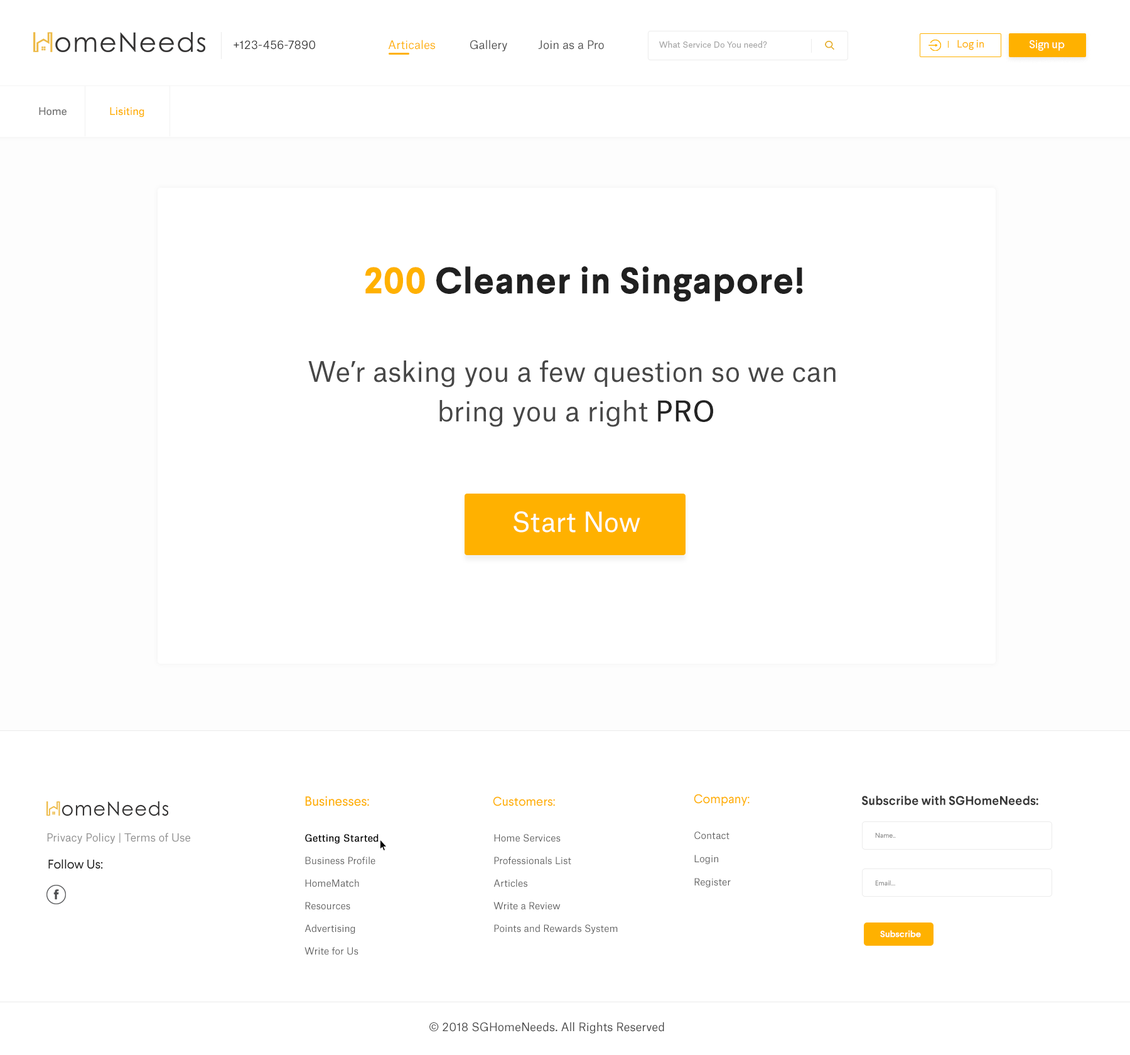
<style>
.page{position:relative;width:1130px;height:1055px;background:#ffffff}
.page>*{position:absolute;margin:0}
.t1{font:11.3px "AtlasGrotesk-Regular";color:#3a3a3a}
.t2{font:11.3px "AtlasGrotesk-Regular";color:#505050}
.t3{font:11.3px "AtlasGrotesk-Regular";color:#ffb100}
.t4{font:8.2px "AtlasGrotesk-Regular";color:#a8a8a8}
.t5{font:10.7px "Larsseit";color:#ffb100}
.t6{font:11.3px "Larsseit";color:#ffffff}
.t7{font:10px "AtlasGrotesk-Regular";color:#737373}
.t8{font:10px "AtlasGrotesk-Regular";color:#ffb100}
.t9{font:36.4px "Larsseit-Bold";color:#202020;font-weight:bold}
.t10{font:36.4px "Larsseit-Bold";color:#ffb100;font-weight:bold}
.t11{font:27px/39.6px "AtlasGrotesk-Regular";color:#474747}
.t12{font:27px/39.6px "AtlasGrotesk-Regular";color:#242424;font-weight:bold}
.t13{font:26.4px "AtlasGrotesk-Regular";color:#fdfdfd}
.t14{font:13.2px "Larsseit";color:#ffb100}
.t15{font:12.6px "Larsseit";color:#ffb100}
.t16{font:12.6px "Larsseit-Bold";color:#383838}
.t17{font:10.7px "AtlasGrotesk-Regular";color:#919191}
.t18{font:9.4px/22.6px "AtlasGrotesk-Regular";color:#5f5f5f}
.t19{font:9.4px/22.6px "AtlasGrotesk-Regular";color:#000000;font-weight:bold}
.t20{font:9.4px/23.2px "AtlasGrotesk-Regular";color:#5f5f5f}
.t21{font:6.9px "Larsseit";color:#848484}
.t22{font:12.6px "Larsseit";color:#1f1f1f}
.t23{font:8.8px "Larsseit";color:#ffffff;font-weight:bold}
.t24{font:11.3px "AtlasGrotesk-Regular";color:#454545}
</style>
<div class="page">
<p class="t1" style="left:234px;top:40px;width:81px;height:10px">+123-456-7890</p>
<p class="t2" style="left:388px;top:40px;width:216px;height:11px"><span class="t3">Articales</span>           Gallery          Join as a Pro</p>
<p class="t4" style="left:659px;top:41px;width:108px;height:7px">What Service Do You need?</p>
<p class="t5" style="left:958px;top:40px;width:26px;height:10px">Log in</p>
<p class="t6" style="left:1030px;top:40px;width:35px;height:11px">Sign up</p>
<p class="t7" style="left:39px;top:107px;width:28px;height:9px">Home</p>
<p class="t8" style="left:110px;top:107px;width:34px;height:10px">Lisiting</p>
<p class="t9" style="left:365px;top:266px;width:438px;height:36px"><span class="t10">200</span> Cleaner in Singapore!</p>
<p class="t11" style="left:308px;top:360px;width:528px;height:67px;text-align:center">We’r asking you a few question so we can <br>bring you a right <span class="t12">PRO</span></p>
<p class="t13" style="left:514px;top:511px;width:127px;height:22px">Start Now</p>
<p class="t14" style="left:305px;top:796px;width:64px;height:10px">Businesses:</p>
<p class="t15" style="left:493px;top:796px;width:62px;height:10px">Customers:</p>
<p class="t15" style="left:694px;top:794px;width:56px;height:12px">Company:</p>
<p class="t16" style="left:862px;top:796px;width:177px;height:9px">Subscribe with SGHomeNeeds:</p>
<p class="t17" style="left:47px;top:833px;width:143px;height:11px">Privacy Policy | Terms of Use</p>
<p class="t18" style="left:305px;top:834px;width:74px;height:121px"><span class="t19">Getting Started<br></span>Business Profile<br>HomeMatch<br>Resources<br>Advertising<br>Write for Us</p>
<p class="t18" style="left:494px;top:834px;width:124px;height:100px">Home Services<br>Professionals List<br>Articles<br>Write a Review<br>Points and Rewards System</p>
<p class="t20" style="left:695px;top:831px;width:36px;height:56px">Contact<br>Login<br>Register</p>
<p class="t21" style="left:875px;top:833px;width:21px;height:5px">Name..</p>
<p class="t22" style="left:48px;top:859px;width:55px;height:10px">Follow Us:</p>
<p class="t21" style="left:875px;top:880px;width:20px;height:5px">Email...</p>
<p class="t23" style="left:880px;top:930px;width:41px;height:8px">Subscribe</p>
<p class="t24" style="left:430px;top:1022px;width:234px;height:12px">© 2018 SGHomeNeeds. All Rights Reserved</p>
</div>
